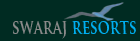
<style>
.page{position:relative;width:140px;height:41px;background:#002b22}
.page>*{position:absolute;margin:0}
.t1{font:20.2px "TrajanPro-Bold";color:#00aeef;scale:0.72 1}
.t2{font:20.2px "TrajanPro-Bold";color:#898989;scale:0.72 1}
</style>
<div class="page">
<p class="t1" style="left:13px;top:21px;width:123px;height:18px"><span class="t2">swaraj</span> resorts</p>
</div>
